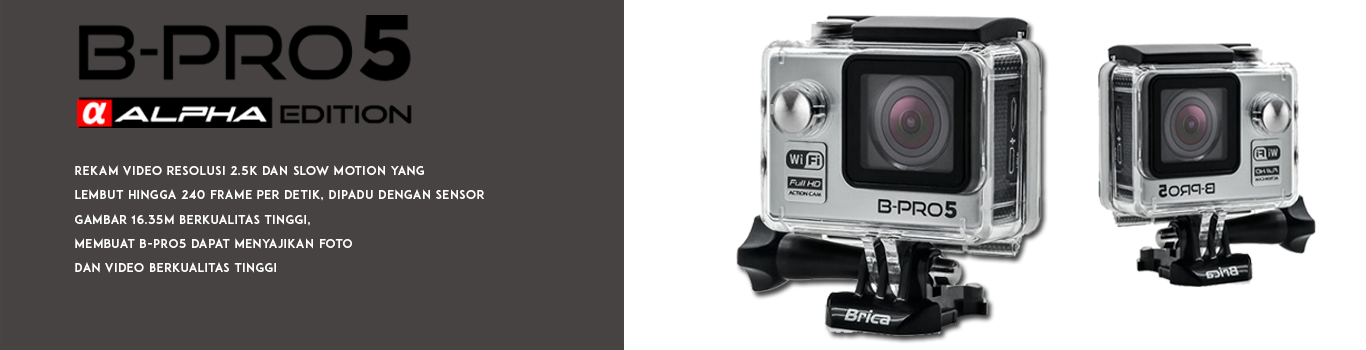
<style>
.page{position:relative;width:1366px;height:350px;background:#474343}
.page>*{position:absolute;margin:0}
.t1{font:12px "ADAM.CGPRO";letter-spacing:0.05em;color:#ffffff}
</style>
<div class="page">
<p class="t1" style="left:75px;top:165px;width:409px;height:108px">Rekam video resolusi 2.5K dan slow motion yang <br>lembut hingga 240 frame per detik, dipadu dengan sensor <br>gambar 16.35M berkualitas tinggi, <br>membuat B-PRO5 dapat menyajikan foto <br>dan video berkualitas tinggi</p>
</div>
